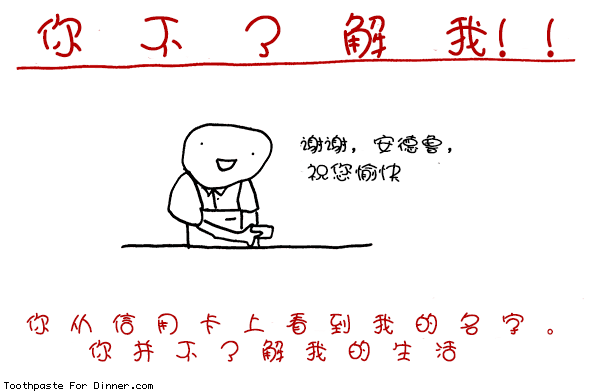
<style>
.page{position:relative;width:600px;height:392px;background:#ffffff}
.page>*{position:absolute;margin:0}
.t1{font:48px "JWaWAZuan";letter-spacing:1.12em;color:#b40101}
.t2{font:48px "JWaWAZuan";color:#b40101}
.t3{font:19.7px "JWaWAZuan";color:#000000;scale:1.22 1}
.t4{font:24px/27px "JWaWAZuan";letter-spacing:0.8em;color:#b40101}
</style>
<div class="page">
<p class="t1" style="left:37px;top:12px;width:517px;height:47px">你不了解<span class="t2">我！！</span></p>
<p class="t3" style="left:300px;top:134px;width:152px;height:20px">谢谢，安德鲁，</p>
<p class="t3" style="left:307px;top:162px;width:94px;height:20px">祝您愉快</p>
<p class="t4" style="left:26px;top:312px;width:527px;height:51px">你从信用卡上看到我的名字。<br>  你并不了解我的生活</p>
</div>
